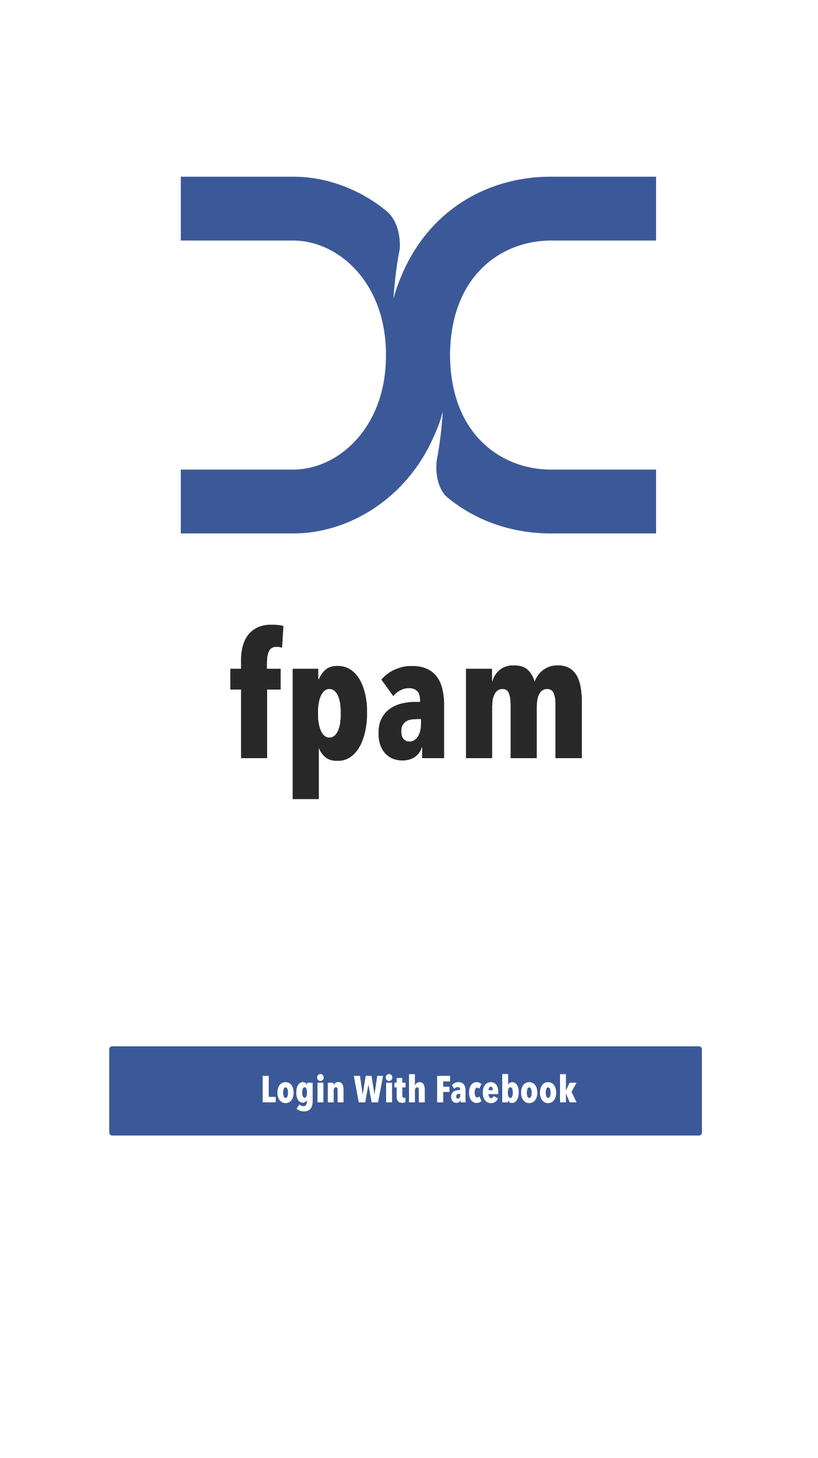
<style>
.page{position:relative;width:818px;height:1458px;background:#ffffff}
.page>*{position:absolute;margin:0}
.t1{font:171px "AvenirNextCondensed-Bold";letter-spacing:0.01em;color:#282828}
.t2{font:37.3px "AvenirNextCondensed-Bold";letter-spacing:0.01em;color:#ffffff}
</style>
<div class="page">
<p class="t1" style="left:230px;top:624px;width:352px;height:175px">fpam</p>
<p class="t2" style="left:262px;top:1074px;width:314px;height:38px">Login With Facebook</p>
</div>
